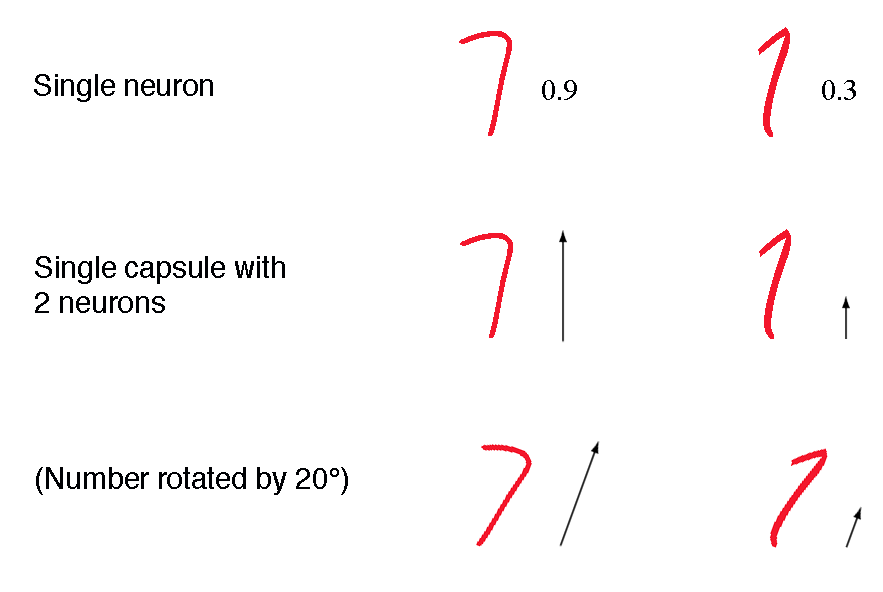
<style>
.page{position:relative;width:883px;height:592px;background:#ffffff}
.page>*{position:absolute;margin:0}
.t1{font:30px "Helvetica";letter-spacing:-0.01em;color:#000104}
.t2{font:30px "TimesNewRomanPSMT";letter-spacing:-0.01em;color:#000104}
.t3{font:30px/1.8px "Helvetica";letter-spacing:-0.01em;color:#000104}
</style>
<div class="page">
<p class="t1" style="left:34px;top:74px;width:179px;height:28px">Single neuron</p>
<p class="t2" style="left:542px;top:80px;width:35px;height:20px">0.9</p>
<p class="t2" style="left:822px;top:80px;width:34px;height:20px">0.3</p>
<p class="t3" style="left:35px;top:256px;width:250px;height:57px">Single capsule with<br><br><br>2 neurons</p>
<p class="t1" style="left:36px;top:467px;width:312px;height:28px">(Number rotated by 20°)</p>
</div>
